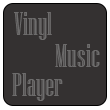
<style>
.page{position:relative;width:110px;height:110px;background:#343131}
.page>*{position:absolute;margin:0}
.t1{font:33.3px "NiagaraEngraved-Reg";color:#6d6c6c}
</style>
<div class="page">
<p class="t1" style="left:14px;top:12px;width:38px;height:28px">Vinyl</p>
<p class="t1" style="left:55px;top:44px;width:45px;height:23px">Music</p>
<p class="t1" style="left:12px;top:73px;width:51px;height:28px">Playerr</p>
</div>
